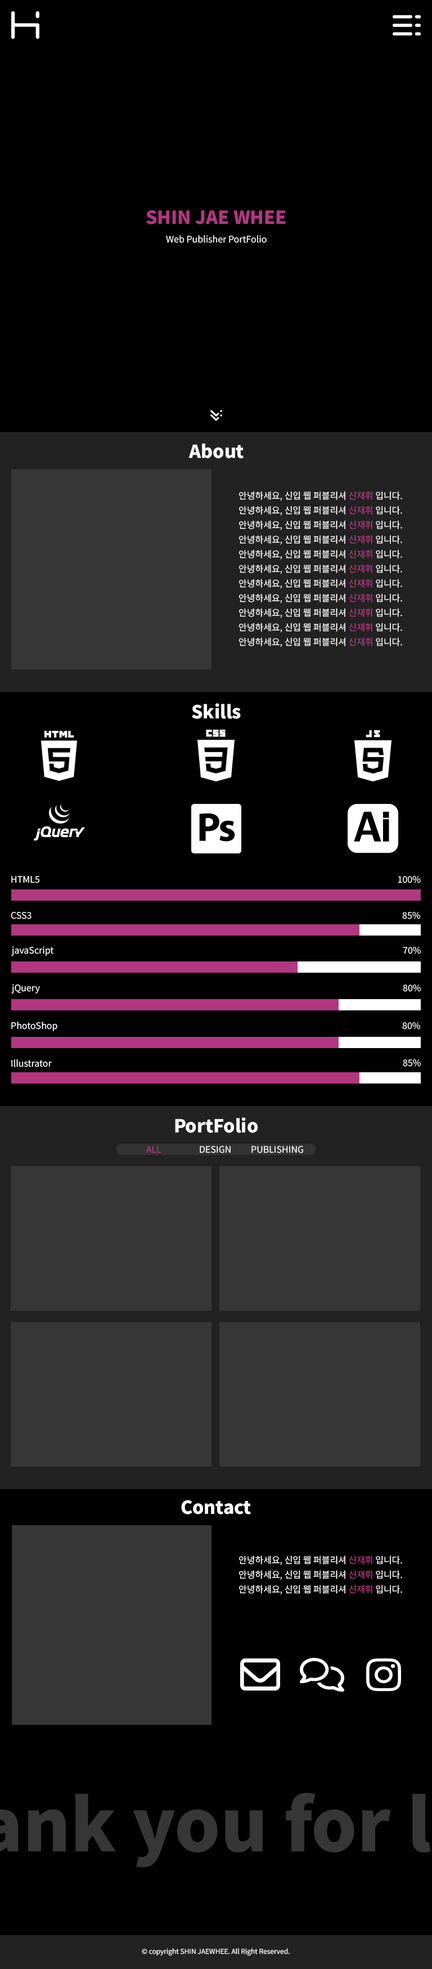
<style>
.page{position:relative;width:432px;height:1969px;background:#000000}
.page>*{position:absolute;margin:0}
.t1{font:18px "NotoSansKR-Black";color:#b33681}
.t2{font:9px "NotoSansKR-Regular";color:#ffffff}
.t3{font:18px "NotoSansKR-Black";color:#ffffff}
.t4{font:9px/14.6px "NotoSansKR-Regular";color:#ffffff}
.t5{font:9px/14.6px "NotoSansKR-Regular";color:#b33681}
.t6{font:9px "NotoSansKR-Regular";color:#b33681}
.t7{font:6.8px "NotoSansKR-Regular";color:#ffffff}
</style>
<div class="page">
<p class="t1" style="left:146px;top:210px;width:140px;height:14px">SHIN JAE WHEE</p>
<p class="t2" style="left:166px;top:235px;width:101px;height:8px">Web Publisher PortFolio</p>
<p class="t3" style="left:188px;top:443px;width:56px;height:15px">About</p>
<p class="t4" style="left:238px;top:491px;width:164px;height:156px">안녕하세요, 신입 웹 퍼블리셔 <span class="t5">신재휘</span> 입니다.<br>안녕하세요, 신입 웹 퍼블리셔 <span class="t5">신재휘</span> 입니다.<br>안녕하세요, 신입 웹 퍼블리셔 <span class="t5">신재휘</span> 입니다.<br>안녕하세요, 신입 웹 퍼블리셔 <span class="t5">신재휘</span> 입니다.<br>안녕하세요, 신입 웹 퍼블리셔 <span class="t5">신재휘</span> 입니다.<br>안녕하세요, 신입 웹 퍼블리셔 <span class="t5">신재휘</span> 입니다.<br>안녕하세요, 신입 웹 퍼블리셔 <span class="t5">신재휘</span> 입니다.<br>안녕하세요, 신입 웹 퍼블리셔 <span class="t5">신재휘</span> 입니다.<br>안녕하세요, 신입 웹 퍼블리셔 <span class="t5">신재휘</span> 입니다.<br>안녕하세요, 신입 웹 퍼블리셔 <span class="t5">신재휘</span> 입니다.<br>안녕하세요, 신입 웹 퍼블리셔 <span class="t5">신재휘</span> 입니다.</p>
<p class="t3" style="left:192px;top:703px;width:49px;height:16px">Skills</p>
<p class="t2" style="left:11px;top:876px;width:29px;height:7px">HTML5</p>
<p class="t2" style="left:398px;top:875px;width:23px;height:8px">100%</p>
<p class="t2" style="left:11px;top:911px;width:21px;height:8px">CSS3</p>
<p class="t2" style="left:402px;top:912px;width:18px;height:7px">85%</p>
<p class="t2" style="left:11px;top:946px;width:42px;height:10px">javaScript</p>
<p class="t2" style="left:403px;top:947px;width:18px;height:7px">70%</p>
<p class="t2" style="left:11px;top:984px;width:29px;height:9px">jQuery</p>
<p class="t2" style="left:403px;top:984px;width:18px;height:8px">80%</p>
<p class="t2" style="left:11px;top:1022px;width:46px;height:9px">PhotoShop</p>
<p class="t2" style="left:402px;top:1022px;width:18px;height:7px">80%</p>
<p class="t2" style="left:11px;top:1059px;width:41px;height:8px">Illustrator</p>
<p class="t2" style="left:403px;top:1059px;width:18px;height:7px">85%</p>
<p class="t3" style="left:175px;top:1117px;width:83px;height:16px">PortFolio</p>
<p class="t6" style="left:146px;top:1146px;width:15px;height:7px">ALL</p>
<p class="t2" style="left:200px;top:1145px;width:31px;height:8px">DESIGN</p>
<p class="t2" style="left:251px;top:1145px;width:52px;height:8px">PUBLISHING</p>
<p class="t3" style="left:181px;top:1500px;width:70px;height:14px">Contact</p>
<p class="t4" style="left:238px;top:1555px;width:164px;height:39px">안녕하세요, 신입 웹 퍼블리셔 <span class="t5">신재휘</span> 입니다.<br>안녕하세요, 신입 웹 퍼블리셔 <span class="t5">신재휘</span> 입니다.<br>안녕하세요, 신입 웹 퍼블리셔 <span class="t5">신재휘</span> 입니다.</p>
<p class="t7" style="left:142px;top:1948px;width:148px;height:8px">© copyright SHIN JAEWHEE. All Right Reserved.</p>
</div>
